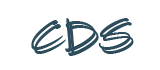
<style>
.page{position:relative;width:160px;height:70px;background:#ffffff}
.page>*{position:absolute;margin:0}
.t1{font:48px "SketchFlowPrint";color:#2d4d5c}
</style>
<div class="page">
<p class="t1" style="left:31px;top:18px;width:100px;height:34px">CDS</p>
<p class="t1" style="left:34px;top:22px;width:100px;height:34px">CDS</p>
</div>
